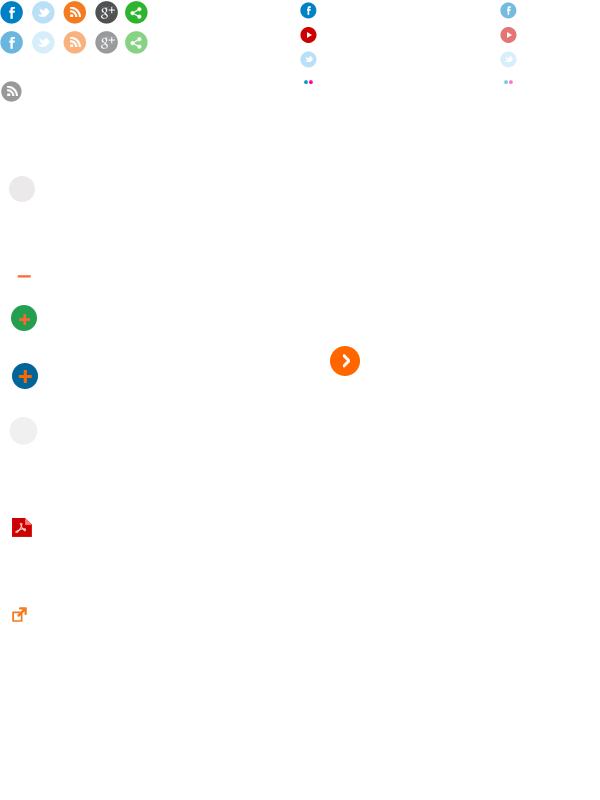
<style>
.page{position:relative;width:600px;height:800px;background:#ffffff}
.page>*{position:absolute;margin:0}
.t1{font:21px "Gotham-Medium";letter-spacing:0.01em;color:#ff6633}
</style>
<div class="page">
<p class="t1" style="left:17px;top:275px;width:14px;height:3px">_</p>
<p class="t1" style="left:19px;top:314px;width:11px;height:11px">+</p>
</div>
